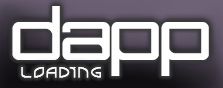
<style>
.page{position:relative;width:223px;height:88px}
.page>*{position:absolute;margin:0}
.t1{font:75.4px "Move-X";letter-spacing:-0.06em;color:#ffffff;font-weight:bold}
.t2{font:13.4px "CLiCHE-21";letter-spacing:0.06em;color:#ffffff;font-weight:bold;scale:1.68 1}
</style>
<div class="page">
<p class="t1" style="left:12px;top:6px;width:197px;height:70px">dapp</p>
<p class="t2" style="left:21px;top:67px;width:80px;height:11px">Loading</p>
</div>
